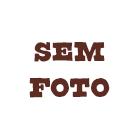
<style>
.page{position:relative;width:140px;height:140px;background:#ffffff}
.page>*{position:absolute;margin:0}
.t1{font:30px "CornDog";color:#5d2b21;text-transform:uppercase}
</style>
<div class="page">
<p class="t1" style="left:29px;top:42px;width:81px;height:56px;text-align:center">SEM<br>FOTO</p>
</div>
